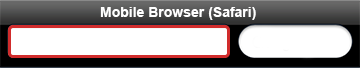
<style>
.page{position:relative;width:360px;height:68px;background:#ffffff}
.page>*{position:absolute;margin:0}
.t1{font:14px "Arial-BoldMT";color:#ffffff}
</style>
<div class="page">
<p class="t1" style="left:100px;top:7px;width:156px;height:13px">Mobile Browser (Safari)</p>
</div>
